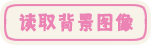
<style>
.page{position:relative;width:151px;height:45px;background:#f7f3e9}
.page>*{position:absolute;margin:0}
.t1{font:12px "shetumodengxiaofangti";color:#eb84b4;font-weight:bold;scale:0.94 1}
</style>
<div class="page">
<p class="t1" style="left:19px;top:13px;width:114px;height:19px">读取背景图像</p>
</div>
